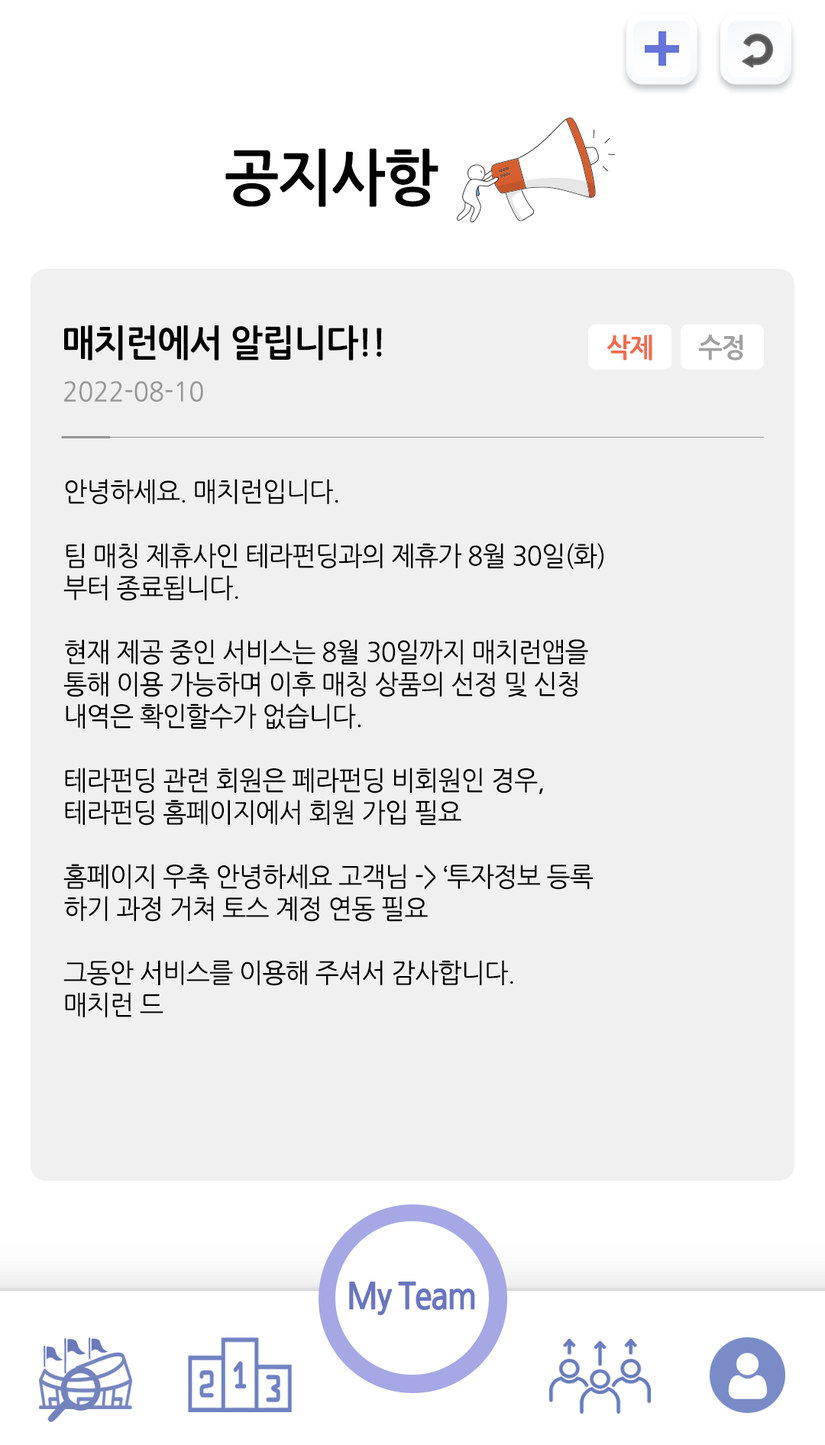
<style>
.page{position:relative;width:825px;height:1445px;background:#f0f0f0}
.page>*{position:absolute;margin:0}
.t1{font:61.1px "NanumGothicBold";letter-spacing:-0.025em;color:#000000;scale:0.95 1}
.t2{font:36.7px "NanumGothicBold";letter-spacing:-0.025em;color:#000000;scale:0.95 1}
.t3{font:26.7px "NanumGothicBold";letter-spacing:-0.025em;color:#f26c4f;scale:0.95 1}
.t4{font:26.7px "NanumGothicBold";letter-spacing:-0.025em;color:#a1a1a1;scale:0.95 1}
.t5{font:26.7px "NanumGothic";color:#959595;scale:0.95 1}
.t6{font:26.7px "NanumGothic";letter-spacing:-0.025em;color:#000000;scale:0.95 1}
</style>
<div class="page">
<p class="t1" style="left:225px;top:148px;width:213px;height:59px">공지사항</p>
<p class="t2" style="left:64px;top:325px;width:318px;height:36px">매치런에서 알립니다!!</p>
<p class="t3" style="left:607px;top:335px;width:136px;height:26px">삭제 <span class="t4">      수정</span></p>
<p class="t5" style="left:64px;top:381px;width:139px;height:21px">2022-08-10</p>
<p class="t6" style="left:63px;top:479px;width:540px;height:539px">안녕하세요. 매치런입니다.<br><br>팀 매칭 제휴사인 테라펀딩과의 제휴가 8월 30일(화)<br>부터 종료됩니다.<br><br>현재 제공 중인 서비스는 8월 30일까지 매치런앱을<br>통해 이용 가능하며 이후 매칭 상품의 선정 및 신청<br>내역은 확인할수가 없습니다.<br><br>테라펀딩 관련 회원은 페라펀딩 비회원인 경우,<br>테라펀딩 홈페이지에서 회원 가입 필요<br><br>홈페이지 우축 안녕하세요 고객님 -&gt; ‘투자정보 등록<br>하기 과정 거쳐 토스 계정 연동 필요<br><br>그동안 서비스를 이용해 주셔서 감사합니다.<br>매치런 드</p>
</div>
